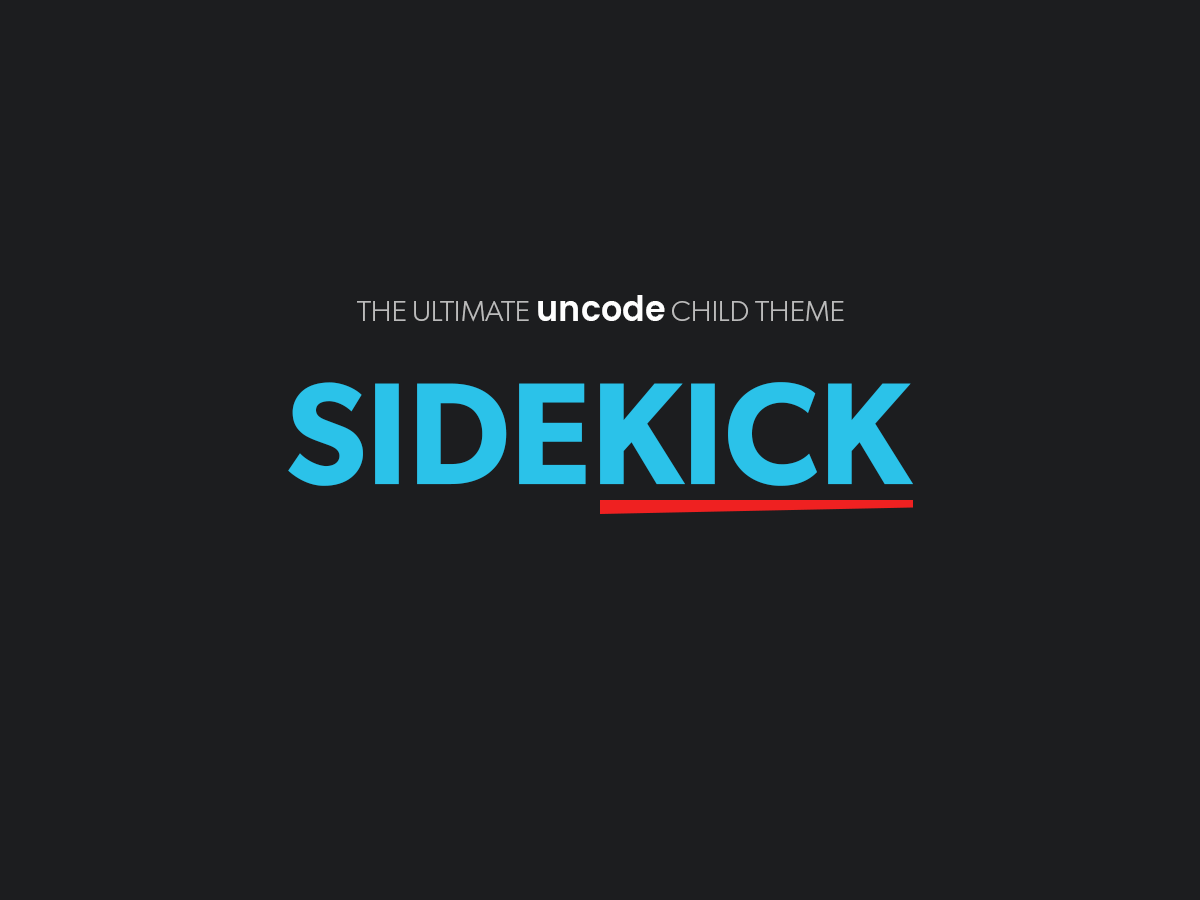
<style>
.page{position:relative;width:1200px;height:900px;background:#1c1d1f}
.page>*{position:absolute;margin:0}
.t1{font:29.2px "Gibson-Light";color:#bbbbbb;text-transform:uppercase}
.t2{font:36px "Poppins-SemiBold";color:#fefefe;scale:0.92 1}
.t3{font:145.4px "Gibson-SemiBold";color:#2bc2e9;text-transform:uppercase}
</style>
<div class="page">
<p class="t1" style="left:357px;top:295px;width:487px;height:27px">The ULTIMATE <span class="t2">uncode</span> Child Theme</p>
<p class="t3" style="left:288px;top:382px;width:625px;height:104px">SIDEKICK</p>
</div>
